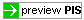
<style>
.page{position:relative;width:84px;height:20px;background:#ffffff}
.page>*{position:absolute;margin:0}
.t1{font:11px "ArialMT";color:#000000}
.t2{font:11px "Arial-BoldMT";color:#000000}
</style>
<div class="page">
<p class="t1" style="left:22px;top:6px;width:59px;height:10px">preview <span class="t2">PIS</span></p>
</div>
